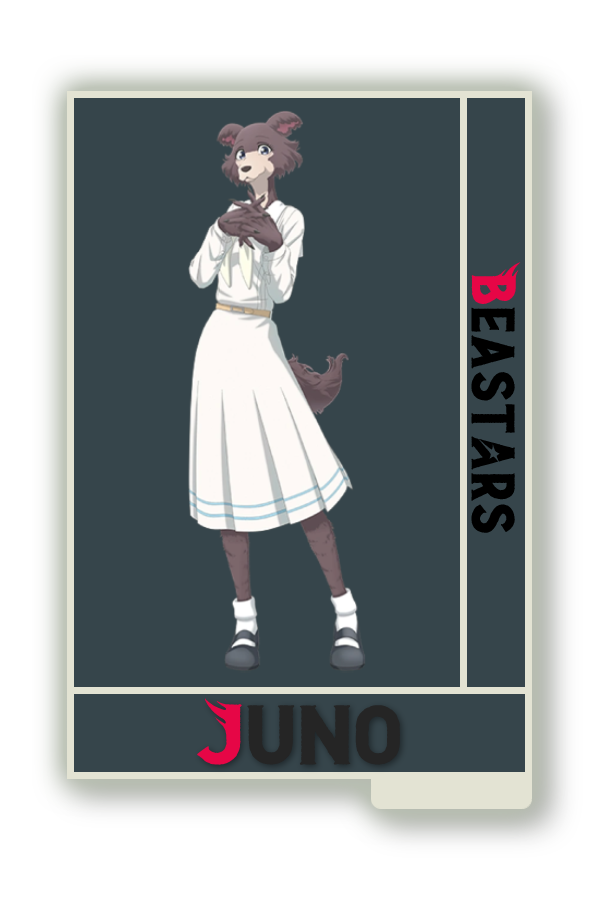
<style>
.page{position:relative;width:600px;height:900px;background:#36454b}
.page>*{position:absolute;margin:0}
.t1{font:48.8px "BEAST";color:#000000}
.t2{font:48.8px "BEAST";color:#e60646}
.t3{font:67px "BEAST";color:#252525;scale:1.12 1}
.t4{font:67px "BEAST";color:#e60646;scale:1.12 1}
</style>
<div class="page">
<p class="t1" style="left:471px;top:262px;width:50px;height:271px;rotate:90deg"><span class="t2">B</span>east@rs</p>
<p class="t3" style="left:197px;top:698px;width:204px;height:67px"><span class="t4">J</span>uno</p>
</div>
